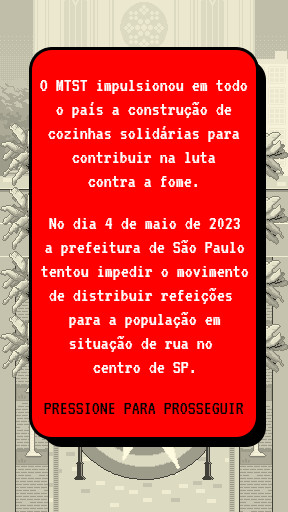
<style>
.page{position:relative;width:288px;height:512px;background:#ff0000}
.page>*{position:absolute;margin:0}
.t1{font:20px "VT323-Regular";color:#ffffff}
.t2{font:20px "VT323-Regular";color:#000000}
</style>
<div class="page">
<p class="t1" style="left:40px;top:80px;width:208px;height:107px;text-align:center">O MTST impulsionou em todo<br>o país a construção de<br>cozinhas solidárias para<br>contribuir na luta<br>contra a fome.</p>
<p class="t1" style="left:41px;top:218px;width:208px;height:155px;text-align:center">No dia 4 de maio de 2023<br>a prefeitura de São Paulo<br>tentou impedir o movimento<br>de distribuir refeições <br>para a população em<br>situação de rua no <br>centro de SP.</p>
<p class="t2" style="left:44px;top:403px;width:200px;height:11px">PRESSIONE PARA PROSSEGUIR</p>
</div>
